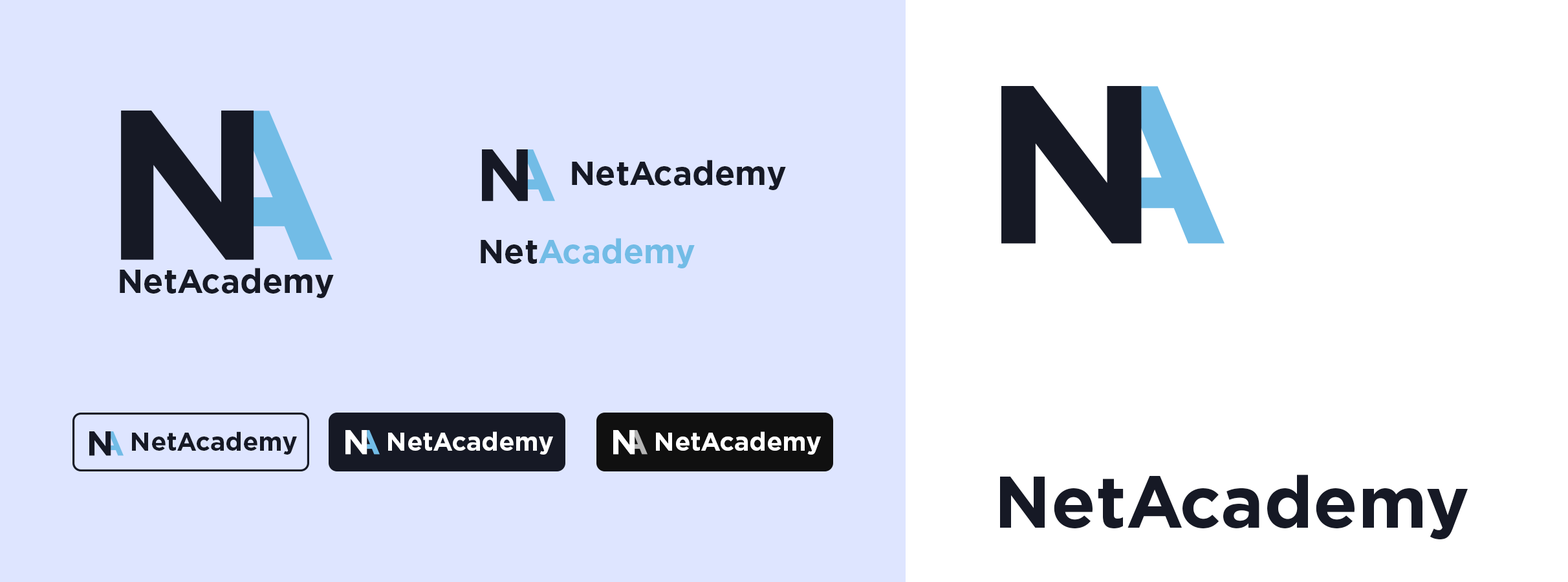
<style>
.page{position:relative;width:1568px;height:582px;background:#dee5ff}
.page>*{position:absolute;margin:0}
.t1{font:33.3px "Gotham-Bold";color:#161925}
.t2{font:33.3px "Gotham-Bold";color:#72bce6}
.t3{font:25.6px "Gotham-Bold";color:#161925}
.t4{font:25.6px "Gotham-Bold";color:#ffffff}
.t5{font:72.9px "Gotham-Bold";color:#161925}
</style>
<div class="page">
<p class="t1" style="left:572px;top:160px;width:214px;height:30px">NetAcademy</p>
<p class="t2" style="left:481px;top:238px;width:214px;height:30px"><span class="t1">Net</span>Academy</p>
<p class="t1" style="left:120px;top:268px;width:214px;height:30px">NetAcademy</p>
<p class="t3" style="left:132px;top:431px;width:165px;height:24px">NetAcademy</p>
<p class="t4" style="left:388px;top:431px;width:165px;height:24px">NetAcademy</p>
<p class="t4" style="left:656px;top:431px;width:165px;height:24px">NetAcademy</p>
<p class="t5" style="left:1000px;top:475px;width:468px;height:64px">NetAcademy</p>
</div>
